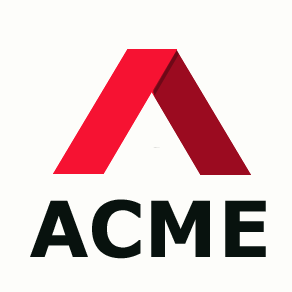
<style>
.page{position:relative;width:292px;height:292px;background:#fdfdfa}
.page>*{position:absolute;margin:0}
.t1{font:77.3px "Verdana-Bold";color:#08120e}
</style>
<div class="page">
<p class="t1" style="left:30px;top:199px;width:236px;height:60px">ACME</p>
</div>
